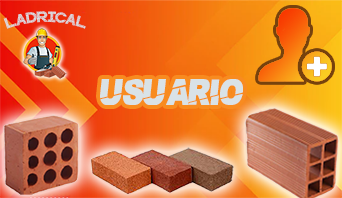
<style>
.page{position:relative;width:342px;height:198px}
.page>*{position:absolute;margin:0}
.t1{font:14.9px "BRICKWALL";color:#d9e2e7}
.t2{font:37.1px "PaybAck";color:#d9e2e7}
</style>
<div class="page">
<p class="t1" style="left:3px;top:11px;width:83px;height:18px">LADRICAL</p>
<p class="t2" style="left:100px;top:79px;width:143px;height:26px">USUARIO</p>
</div>
